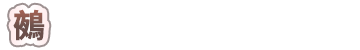
<style>
.page{position:relative;width:360px;height:50px;background:#ffffff}
.page>*{position:absolute;margin:0}
.t1{font:32px "SourceHanSansSC-Bold";font-weight:bold}
</style>
<div class="page">
<p class="t1" style="left:13px;top:9px;width:32px;height:32px">鵺</p>
</div>
